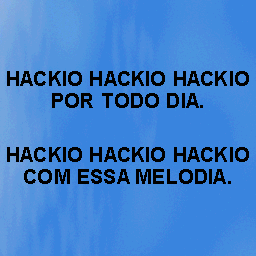
<style>
.page{position:relative;width:256px;height:256px;background:#3984de}
.page>*{position:absolute;margin:0}
.t1{font:20px/22px "Arial-BoldMT";letter-spacing:0.01em;color:#000000}
</style>
<div class="page">
<p class="t1" style="left:7px;top:71px;width:242px;height:37px;text-align:center">HACKIO HACKIO HACKIO<br>POR TODO DIA.</p>
<p class="t1" style="left:7px;top:147px;width:242px;height:37px;text-align:center">HACKIO HACKIO HACKIO<br>COM ESSA MELODIA.</p>
</div>
